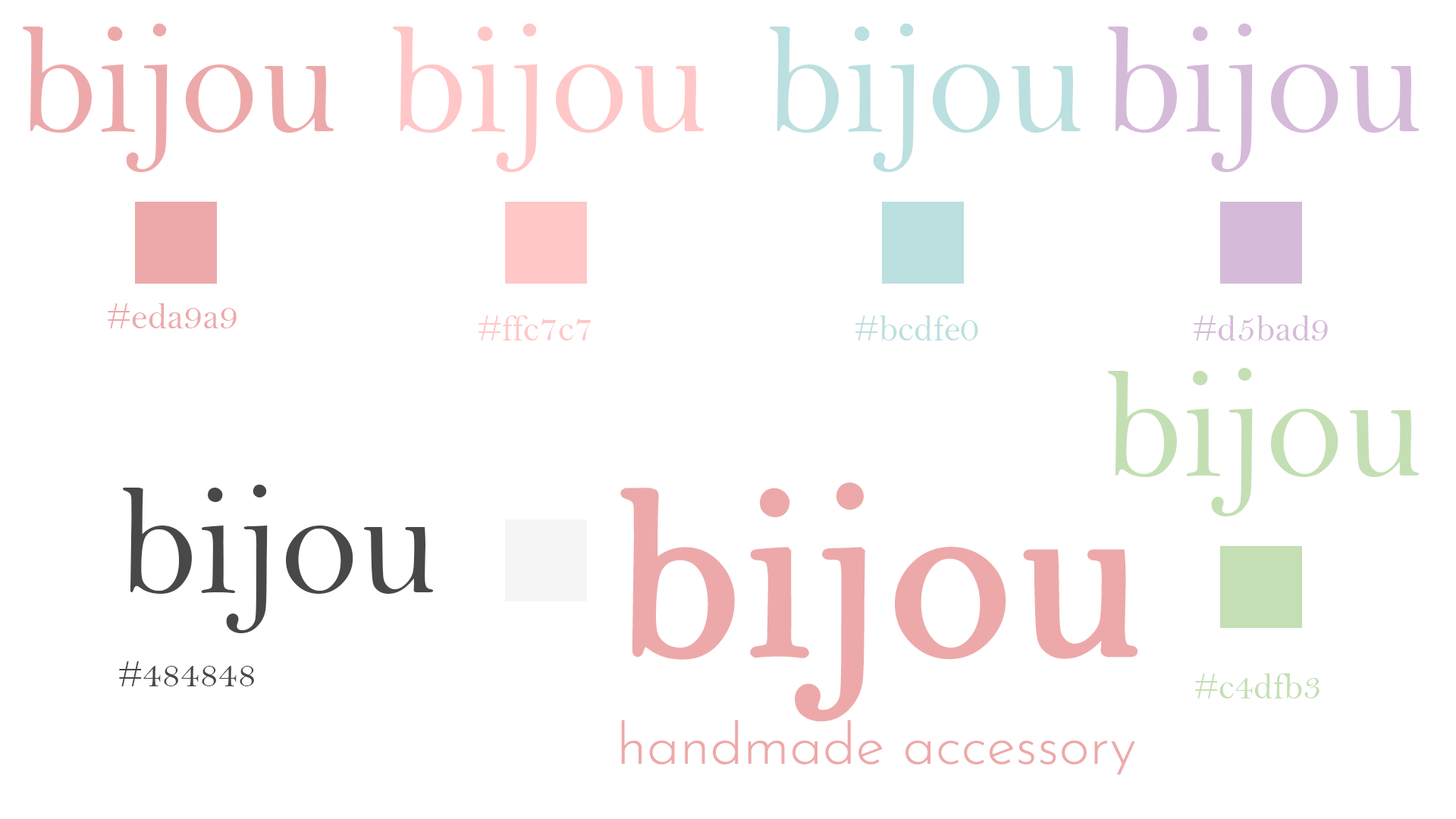
<style>
.page{position:relative;width:1456px;height:819px;background:#ffffff}
.page>*{position:absolute;margin:0}
.t1{font:158.6px "BellMT";color:#eda9a9}
.t2{font:158.6px "BellMT";color:#ffc7c7}
.t3{font:158.6px "BellMT";color:#bcdfe0}
.t4{font:158.6px "BellMT";color:#d5bad9}
.t5{font:37.8px "BellMT";color:#eda9a9}
.t6{font:37.9px "BellMT";color:#ffc7c7}
.t7{font:37.9px "BellMT";color:#bcdfe0}
.t8{font:37.9px "BellMT";color:#d5bad9}
.t9{font:158.6px "BellMT";color:#c4dfb3}
.t10{font:158.7px "BellMT";color:#474747}
.t11{font:246.6px "BellMT";color:#eda9a9;font-weight:bold}
.t12{font:37.9px "BellMT";color:#474747}
.t13{font:37.9px "BellMT";color:#c4dfb3}
.t14{font:57.5px "JosefinSans-Light";color:#eda9a9;font-weight:bold}
</style>
<div class="page">
<p class="t1" style="left:23px;top:24px;width:311px;height:148px">bijou</p>
<p class="t2" style="left:393px;top:24px;width:311px;height:148px">bijou</p>
<p class="t3" style="left:770px;top:24px;width:311px;height:148px">bijou</p>
<p class="t4" style="left:1108px;top:24px;width:312px;height:148px">bijou</p>
<p class="t5" style="left:108px;top:303px;width:129px;height:25px">#eda9a9</p>
<p class="t6" style="left:479px;top:315px;width:112px;height:25px">#ffc7c7</p>
<p class="t7" style="left:855px;top:315px;width:123px;height:25px">#bcdfe0</p>
<p class="t8" style="left:1194px;top:315px;width:134px;height:25px">#d5bad9</p>
<p class="t9" style="left:1108px;top:368px;width:312px;height:148px">bijou</p>
<p class="t10" style="left:123px;top:485px;width:311px;height:148px">bijou</p>
<p class="t11" style="left:620px;top:482px;width:518px;height:240px">bijou</p>
<p class="t12" style="left:119px;top:661px;width:135px;height:25px">#484848</p>
<p class="t13" style="left:1195px;top:673px;width:124px;height:25px">#c4dfb3</p>
<p class="t14" style="left:621px;top:720px;width:514px;height:55px">handmade accessory</p>
</div>
